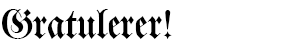
<style>
.page{position:relative;width:300px;height:50px;background:#ffffff}
.page>*{position:absolute;margin:0}
.t1{font:17.7px "DSWalbaumfraktur";color:#000000}
</style>
<div class="page">
<p class="t1" style="left:2px;top:9px;width:170px;height:30px">Gratulerer!</p>
</div>
